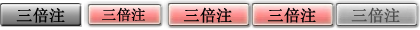
<style>
.page{position:relative;width:420px;height:30px}
.page>*{position:absolute;margin:0}
.t1{font:16px "SimSun";color:#010101;font-weight:bold}
.t2{font:14.4px "SimSun";color:#010101;font-weight:bold}
.t3{font:16px "SimSun";color:#4d4d4d;font-weight:bold}
</style>
<div class="page">
<p class="t1" style="left:16px;top:7px;width:49px;height:16px">三倍注</p>
<p class="t2" style="left:102px;top:7px;width:43px;height:15px">三倍注</p>
<p class="t1" style="left:183px;top:7px;width:49px;height:16px">三倍注</p>
<p class="t1" style="left:267px;top:7px;width:49px;height:16px">三倍注</p>
<p class="t3" style="left:351px;top:7px;width:49px;height:16px">三倍注</p>
</div>
